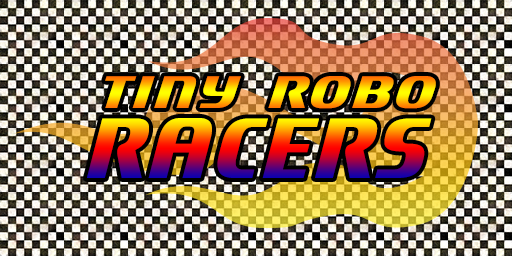
<style>
.page{position:relative;width:512px;height:256px}
.page>*{position:absolute;margin:0}
.t1{font:72px "Motorwerk";letter-spacing:0.025em}
.t2{font:134.3px "Motorwerk";letter-spacing:0.025em;scale:0.8 1}
</style>
<div class="page">
<p class="t1" style="left:105px;top:76px;width:136px;height:32px">Tiny</p>
<p class="t1" style="left:268px;top:76px;width:168px;height:33px">ROBO</p>
<p class="t2" style="left:87px;top:118px;width:345px;height:60px">Racers</p>
</div>
